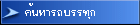
<style>
.page{position:relative;width:140px;height:25px}
.page>*{position:absolute;margin:0}
.t1{font:15.3px "EucrosiaDSE";color:#ffffff;scale:1.12 1}
</style>
<div class="page">
<p class="t1" style="left:25px;top:3px;width:70px;height:16px">¤é¹ËÒÃ¶ºÃÃ·Ø¡</p>
</div>
